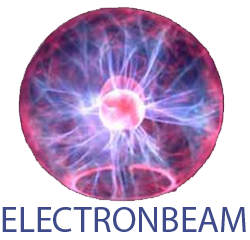
<style>
.page{position:relative;width:250px;height:240px;background:#ffffff}
.page>*{position:absolute;margin:0}
.t1{font:36px "MyriadPro-Regular";color:#3e4a8a}
</style>
<div class="page">
<p class="t1" style="left:2px;top:207px;width:244px;height:25px">ELECTRONBEAM</p>
</div>
